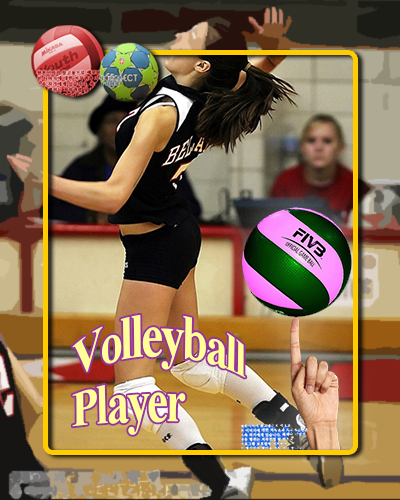
<style>
.page{position:relative;width:400px;height:500px}
.page>*{position:absolute;margin:0}
.t1{font:45px/48px "TimesNewRomanPS-BoldMT";letter-spacing:-0.05em;color:#ffff99}
</style>
<div class="page">
<p class="t1" style="left:72px;top:314px;width:174px;height:121px">Volleyball<br>Player</p>
</div>
